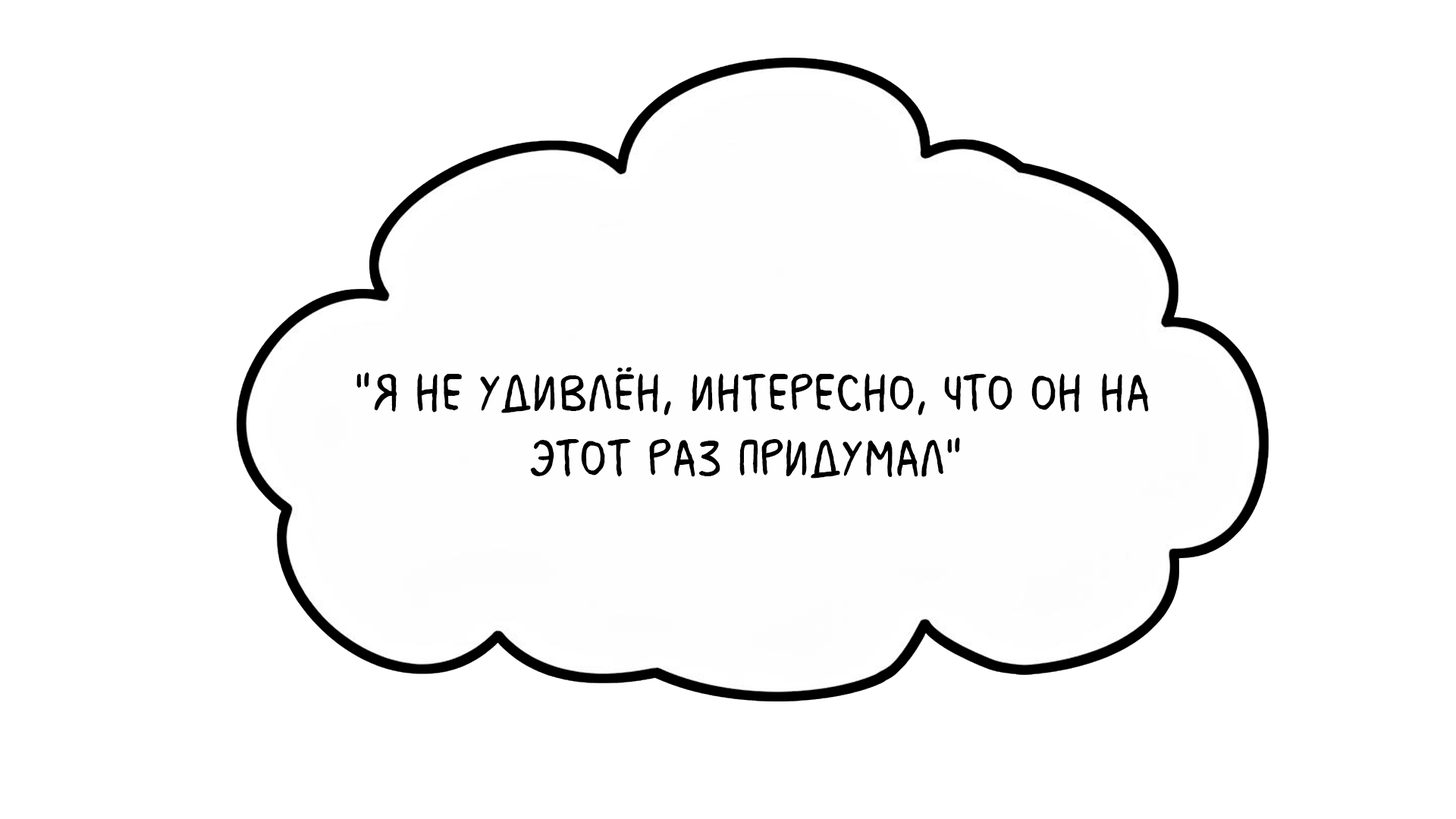
<style>
.page{position:relative;width:1456px;height:819px;background:#ffffff}
.page>*{position:absolute;margin:0}
.t1{font:54.6px "MilkMustacheBB";color:#000000}
</style>
<div class="page">
<p class="t1" style="left:356px;top:367px;width:793px;height:112px">"Я не удивлён, интересно, что он на <br>       этот раз придумал"</p>
</div>
